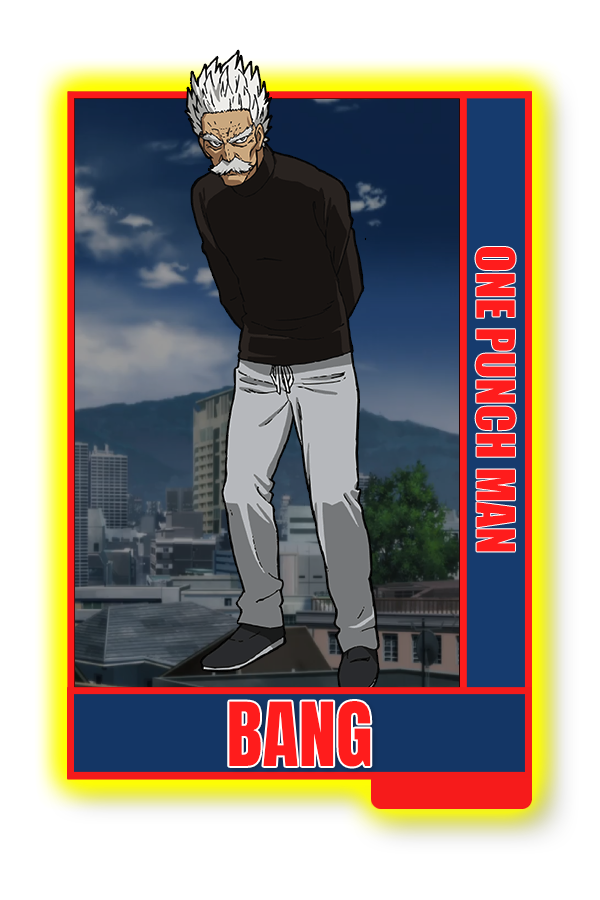
<style>
.page{position:relative;width:600px;height:900px;background:#ffffff}
.page>*{position:absolute;margin:0}
.t1{font:48.8px "Impact";color:#ff1c1c}
.t2{font:75px "Impact";color:#ff1c1c}
</style>
<div class="page">
<p class="t1" style="left:475px;top:246px;width:41px;height:306px;rotate:90deg">ONE PUNCH MAN</p>
<p class="t2" style="left:229px;top:700px;width:142px;height:67px">BANG</p>
</div>
